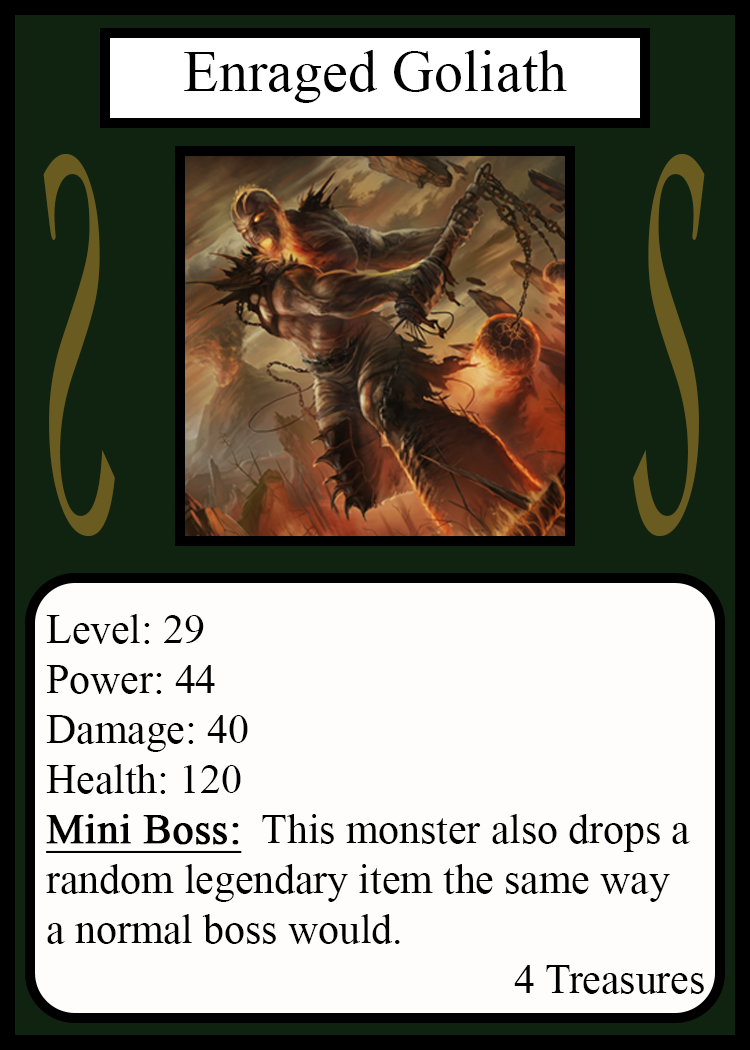
<style>
.page{position:relative;width:750px;height:1050px;background:#fffcfc}
.page>*{position:absolute;margin:0}
.t1{font:58.3px "TimesNewRomanPSMT";color:#010101}
.t2{font:548.5px "Apple-Chancery";color:#6a5c21;scale:0.27 1}
.t3{font:548.2px "Apple-Chancery";color:#6a5c21;scale:0.27 1}
.t4{font:41.7px "TimesNewRomanPSMT";color:#000000}
.t5{font:41.7px "TimesNewRomanPSMT";color:#000000;font-weight:bold;text-decoration:underline}
</style>
<div class="page">
<p class="t1" style="left:184px;top:50px;width:383px;height:53px">Enraged Goliath</p>
<p class="t2" style="left:43px;top:154px;width:72px;height:382px;rotate:180deg">S</p>
<p class="t3" style="left:633px;top:154px;width:72px;height:382px">S</p>
<p class="t4" style="left:46px;top:614px;width:658px;height:380px">Level: 29<br>Power: 44<br>Damage: 40<br>Health: 120<br><span class="t5">Mini Boss:</span>  This monster also drops a<br>random legendary item the same way<br>a normal boss would.<br>             4 Treasures</p>
</div>
